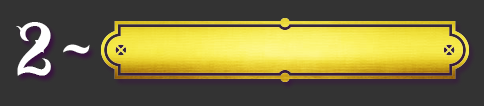
<style>
.page{position:relative;width:484px;height:106px;background:#333333}
.page>*{position:absolute;margin:0}
.t1{font:100px "Moyers";color:#ffffff}
</style>
<div class="page">
<p class="t1" style="left:16px;top:22px;width:35px;height:54px">2</p>
<p class="t1" style="left:63px;top:44px;width:27px;height:10px">~</p>
</div>
